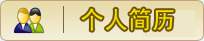
<style>
.page{position:relative;width:204px;height:41px}
.page>*{position:absolute;margin:0}
.t1{font:24px "SimHei";color:#f5e000}
</style>
<div class="page">
<p class="t1" style="left:81px;top:8px;width:93px;height:23px">个人简历</p>
</div>
